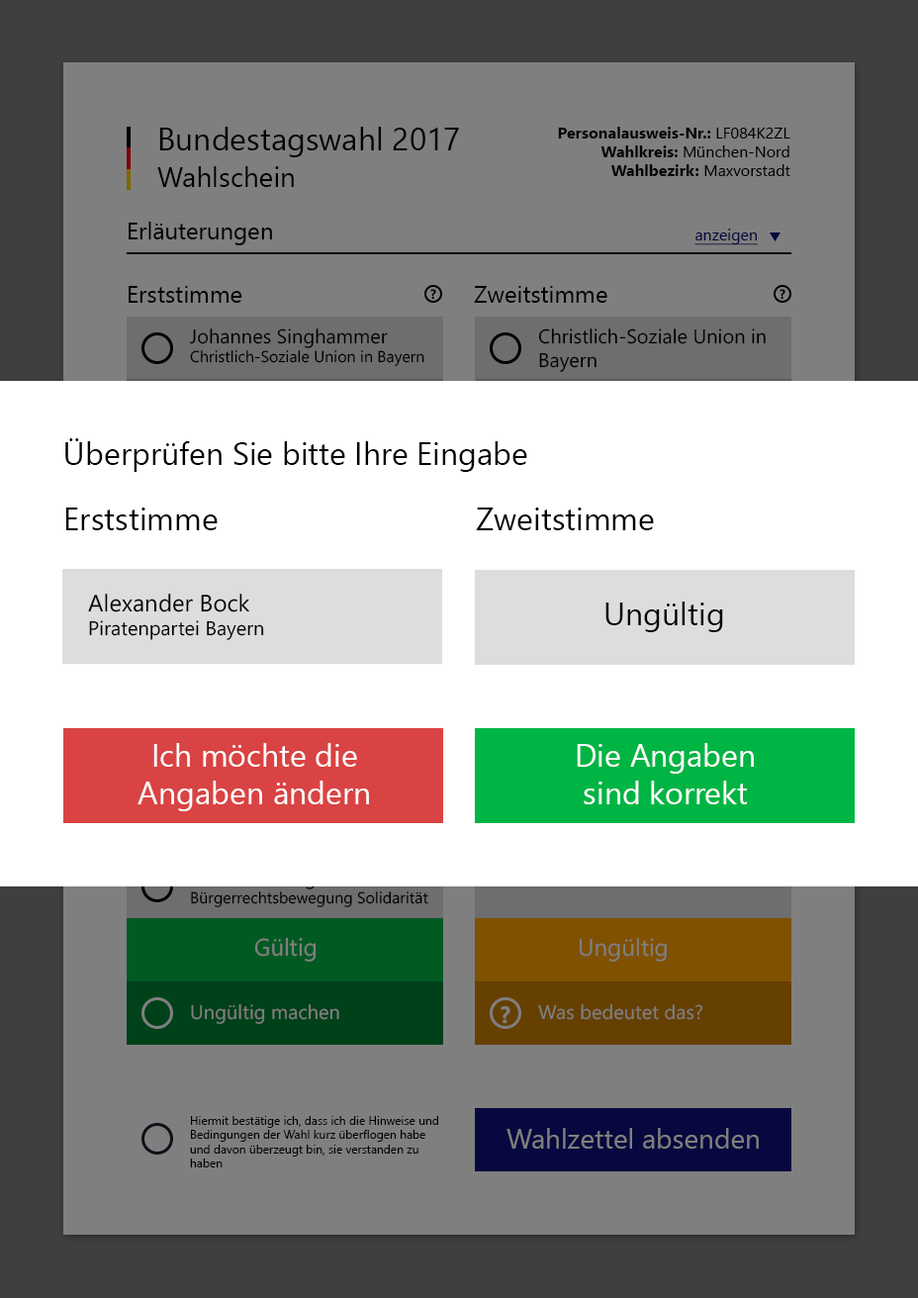
<style>
.page{position:relative;width:918px;height:1298px;background:#7f7f7f}
.page>*{position:absolute;margin:0}
.t1{font:31.7px "SegoeUI";color:#000000}
.t2{font:15.8px "SegoeUI-Bold";color:#000000}
.t3{font:15.8px "SegoeUI";color:#000000}
.t4{font:27.7px "SegoeUI";color:#000000}
.t5{font:23.8px "SegoeUI";color:#000000}
.t6{font:15.8px "SegoeUI";color:#07083f;text-decoration:underline}
.t7{font:13.3px "SegoeUI-Bold";color:#000000}
.t8{font:19.8px "SegoeUI";color:#000000}
.t9{font:31.7px "SegoeUI";color:#ffffff}
.t10{font:23.9px "SegoeUI";color:#7f7f7f}
.t11{font:23.7px "SegoeUI";color:#7f7f7f}
.t12{font:19.8px "SegoeUI";color:#7f7f7f}
.t13{font:23.7px "SegoeUI-Bold";color:#7f7f7f}
.t14{font:11.9px "SegoeUI";color:#000000}
.t15{font:27.7px "SegoeUI";color:#7f7f7f}
</style>
<div class="page">
<p class="t1" style="left:159px;top:127px;width:300px;height:30px">Bundestagswahl 2017</p>
<p class="t2" style="left:558px;top:127px;width:233px;height:49px;text-align:right">Personalausweis-Nr.: <span class="t3">LF084K2ZL<br></span>Wahlkreis:<span class="t3"> München-Nord<br></span>Wahlbezirk: <span class="t3">Maxvorstadt</span></p>
<p class="t4" style="left:157px;top:166px;width:137px;height:21px">Wahlschein</p>
<p class="t5" style="left:129px;top:222px;width:143px;height:23px">Erläuterungen</p>
<p class="t6" style="left:695px;top:229px;width:63px;height:16px">anzeigen</p>
<p class="t5" style="left:129px;top:286px;width:113px;height:17px">Erststimme</p>
<p class="t7" style="left:430px;top:289px;width:6px;height:11px">?</p>
<p class="t5" style="left:474px;top:286px;width:134px;height:17px">Zweitstimme</p>
<p class="t7" style="left:780px;top:289px;width:6px;height:11px">?</p>
<p class="t3" style="left:190px;top:329px;width:235px;height:37px"><span class="t8">Johannes Singhammer<br></span>Christlich-Soziale Union in Bayern</p>
<p class="t8" style="left:538px;top:329px;width:228px;height:43px">Christlich-Soziale Union in Bayern</p>
<p class="t1" style="left:65px;top:438px;width:462px;height:34px">Überprüfen Sie bitte Ihre Eingabe</p>
<p class="t1" style="left:65px;top:508px;width:153px;height:22px">Erststimme</p>
<p class="t1" style="left:476px;top:508px;width:178px;height:22px">Zweitstimme</p>
<p class="t8" style="left:88px;top:594px;width:176px;height:46px"><span class="t5">Alexander Bock</span> <br>Piratenpartei Bayern</p>
<p class="t1" style="left:606px;top:602px;width:117px;height:30px">Ungültig</p>
<p class="t9" style="left:138px;top:743px;width:231px;height:69px;text-align:center">Ich möchte die <br>Angaben ändern</p>
<p class="t9" style="left:577px;top:743px;width:177px;height:62px;text-align:center">Die Angaben <br>sind korrekt</p>
<p class="t10" style="left:254px;top:937px;width:63px;height:25px">Gültig</p>
<p class="t11" style="left:579px;top:938px;width:88px;height:24px">Ungültig</p>
<p class="t12" style="left:191px;top:1004px;width:148px;height:20px">Ungültig machen</p>
<p class="t13" style="left:501px;top:1006px;width:10px;height:18px">?</p>
<p class="t12" style="left:538px;top:1004px;width:166px;height:16px">Was bedeutet das?</p>
<p class="t14" style="left:190px;top:1116px;width:248px;height:52px">Hiermit bestätige ich, dass ich die Hinweise und Bedingungen der Wahl kurz überflogen habe und davon überzeugt bin, sie verstanden zu haben</p>
<p class="t15" style="left:507px;top:1128px;width:252px;height:21px">Wahlzettel absenden</p>
</div>
